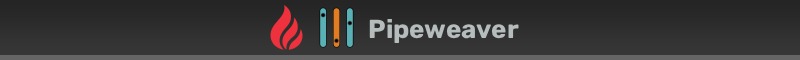
<style>
.page{position:relative;width:800px;height:60px}
.page>*{position:absolute;margin:0}
.t1{font:26px "RubikLight-Bold";color:#b4bcbc}
</style>
<div class="page">
<p class="t1" style="left:369px;top:18px;width:150px;height:25px">Pipeweaver</p>
</div>
